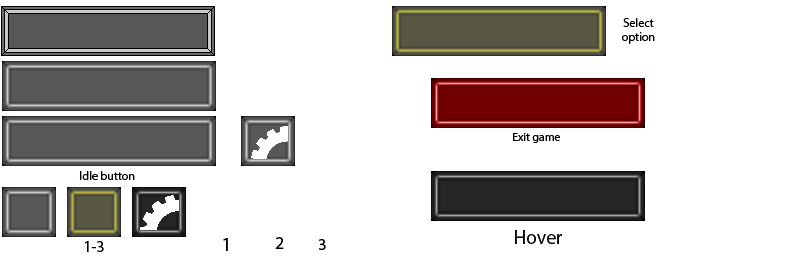
<style>
.page{position:relative;width:800px;height:256px;background:#ffffff}
.page>*{position:absolute;margin:0}
.t1{font:12px "MyriadPro-Regular";color:#000000}
.t2{font:11.7px "MyriadPro-Regular";color:#000000}
.t3{font:19.7px "MyriadPro-Regular";color:#000000}
.t4{font:15.7px "MyriadPro-Regular";color:#000000}
.t5{font:19.3px "MyriadPro-Regular";color:#000000}
.t6{font:17.7px "MyriadPro-Regular";color:#000000}
.t7{font:16.5px "MyriadPro-Regular";color:#000000}
</style>
<div class="page">
<p class="t1" style="left:622px;top:18px;width:33px;height:26px;text-align:center">Select option</p>
<p class="t2" style="left:513px;top:133px;width:47px;height:10px">Exit game</p>
<p class="t1" style="left:80px;top:171px;width:55px;height:9px">Idle button</p>
<p class="t3" style="left:515px;top:230px;width:47px;height:14px">Hover</p>
<p class="t4" style="left:85px;top:241px;width:19px;height:11px">1-3</p>
<p class="t5" style="left:223px;top:238px;width:5px;height:13px">1</p>
<p class="t6" style="left:275px;top:237px;width:9px;height:12px">2</p>
<p class="t7" style="left:318px;top:239px;width:8px;height:11px">3</p>
</div>
